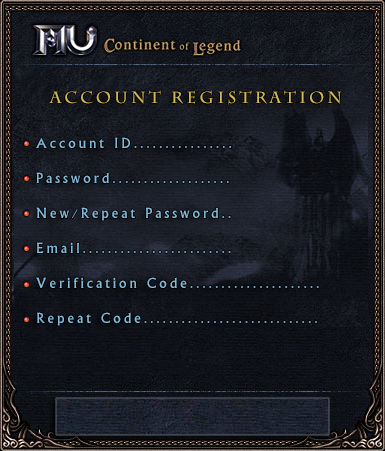
<style>
.page{position:relative;width:385px;height:451px}
.page>*{position:absolute;margin:0}
.t1{font:16px "CharlemagneStd-Bold";letter-spacing:0.2em;color:#d2b953}
.t2{font:15px/35px "Narkisim";letter-spacing:0.2em;color:#84bad7}
</style>
<div class="page">
<p class="t1" style="left:49px;top:90px;width:293px;height:15px">Account Registration</p>
<p class="t2" style="left:36px;top:137px;width:283px;height:189px">Account ID................<br>Password...................<br>New/Repeat Password..<br>Email........................<br>Verification Code.....................<br>Repeat Code............................</p>
</div>
